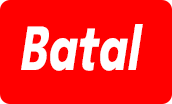
<style>
.page{position:relative;width:172px;height:104px;background:#ff0000}
.page>*{position:absolute;margin:0}
.t1{font:59px "Epilogue-ExtraBoldItalic";letter-spacing:0.01em;color:#ffffff;scale:0.72 1}
</style>
<div class="page">
<p class="t1" style="left:21px;top:24px;width:122px;height:47px">Batal</p>
</div>
